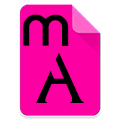
<style>
.page{position:relative;width:120px;height:120px;background:#fd00a1}
.page>*{position:absolute;margin:0}
.t1{font:70.3px "ZawGyiPyinOoLwin";color:#000000}
.t2{font:70.3px "HsiHseng";color:#000000}
</style>
<div class="page">
<p class="t1" style="left:23px;top:14px;width:46px;height:32px">က</p>
<p class="t2" style="left:36px;top:53px;width:48px;height:50px">A</p>
</div>
